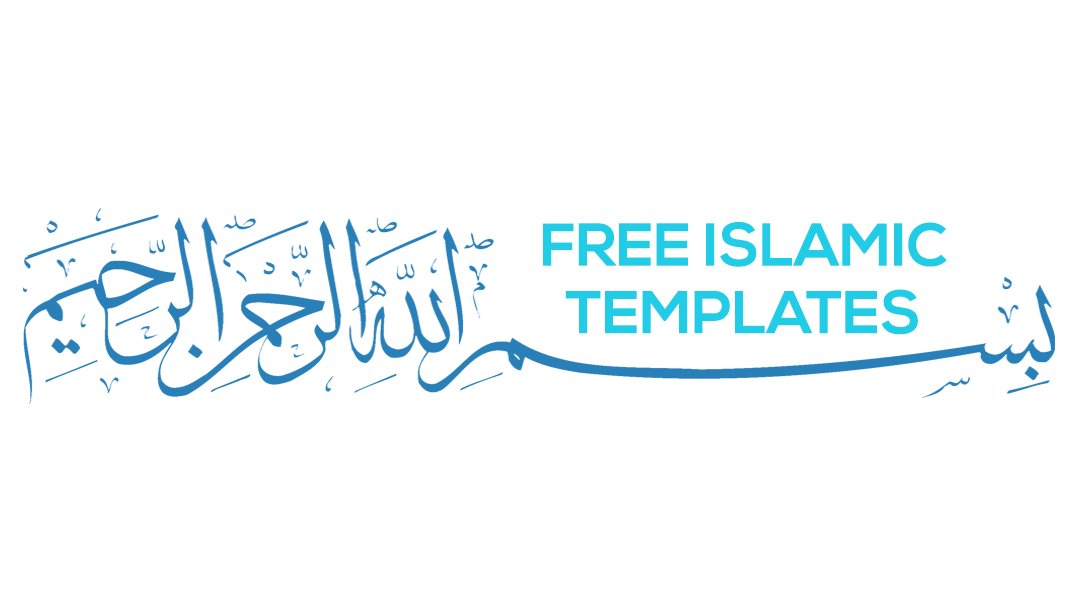
<style>
.page{position:relative;width:1080px;height:608px;background:#ffffff}
.page>*{position:absolute;margin:0}
.t1{font:60.1px/67.6px "NexaBold";color:#20cce6}
</style>
<div class="page">
<p class="t1" style="left:543px;top:222px;width:404px;height:113px;text-align:center">FREE ISLAMIC<br>TEMPLATES</p>
</div>
